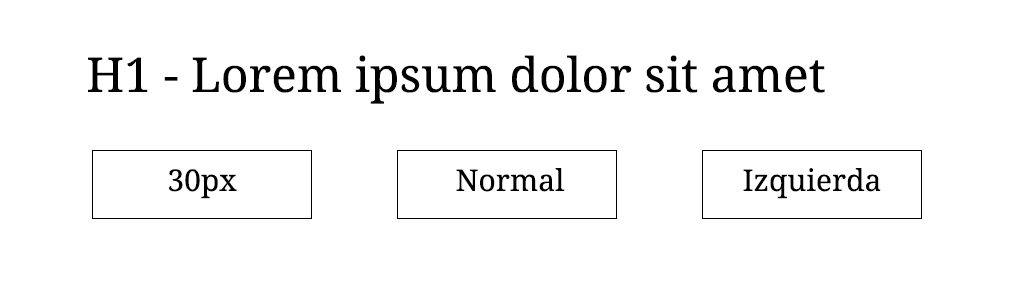
<style>
.page{position:relative;width:1020px;height:300px;background:#ffffff}
.page>*{position:absolute;margin:0}
.t1{font:48px "NotoSerif";color:#000000}
.t2{font:30px "NotoSerif";color:#000000}
</style>
<div class="page">
<p class="t1" style="left:88px;top:55px;width:737px;height:49px">H1 - Lorem ipsum dolor sit amet</p>
<p class="t2" style="left:169px;top:169px;width:68px;height:30px">30px</p>
<p class="t2" style="left:456px;top:168px;width:109px;height:24px">Normal</p>
<p class="t2" style="left:743px;top:168px;width:138px;height:31px">Izquierda</p>
</div>
